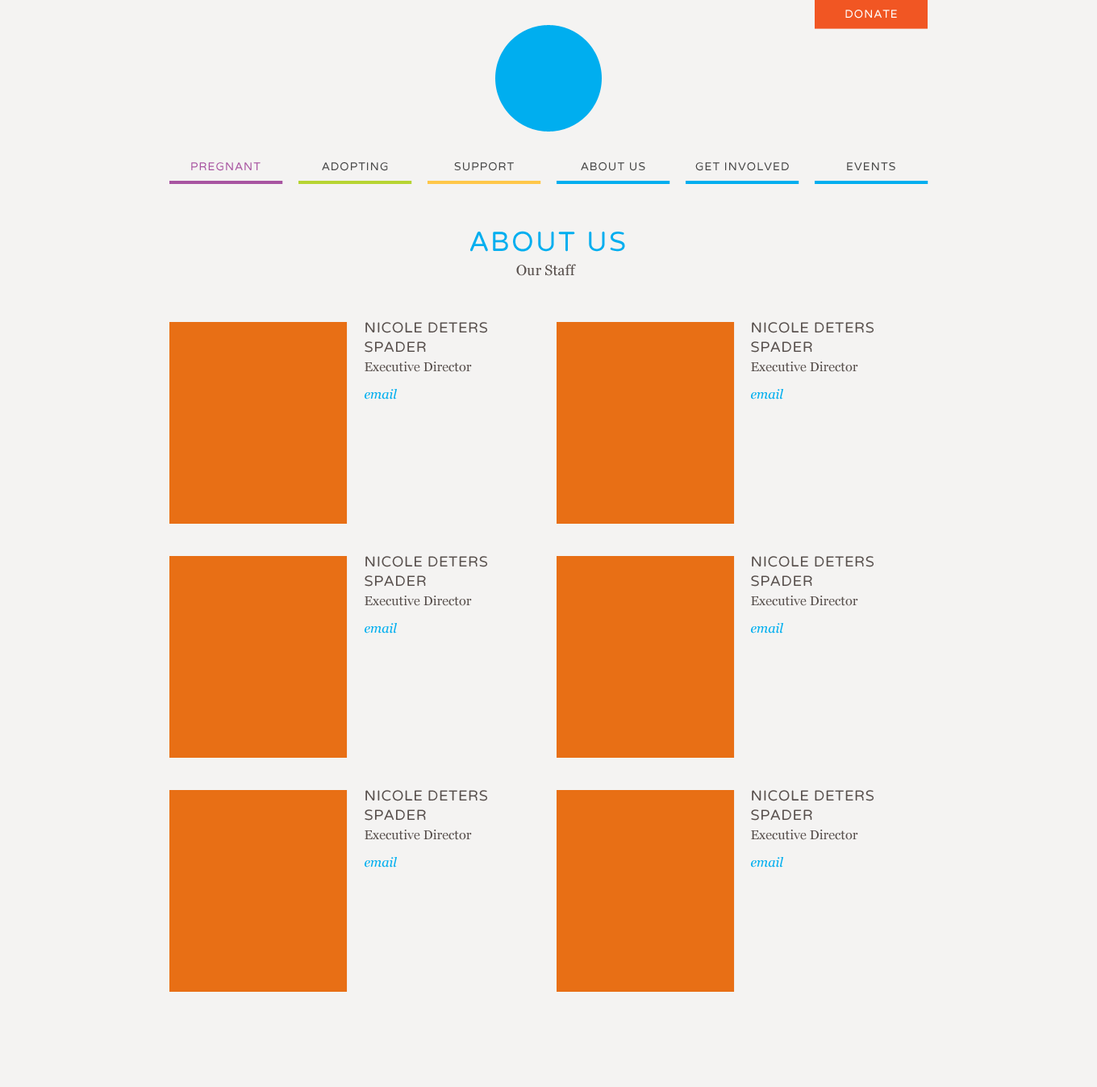
<style>
.page{position:relative;width:1097px;height:1087px;background:#f4f3f2}
.page>*{position:absolute;margin:0}
.t1{font:11.3px "VarelaRound";letter-spacing:0.075em;color:#ffffff;text-transform:uppercase}
.t2{font:11.3px "VarelaRound";letter-spacing:0.075em;color:#a854a1;text-transform:uppercase}
.t3{font:11.3px "VarelaRound";letter-spacing:0.075em;color:#464646;text-transform:uppercase}
.t4{font:27.4px "VarelaRound";letter-spacing:0.075em;color:#00aeef;text-transform:uppercase}
.t5{font:14.5px "Georgia";color:#58504d}
.t6{font:14.5px/19.4px "VarelaRound";letter-spacing:0.04em;color:#58504d;text-transform:uppercase}
.t7{font:12.9px/19.4px "Georgia";letter-spacing:0.005em;color:#58504d}
.t8{font:12.9px/19.4px "Georgia-Italic";letter-spacing:0.005em;color:#00aeef}
</style>
<div class="page">
<p class="t1" style="left:846px;top:10px;width:51px;height:9px">DONATE</p>
<p class="t2" style="left:191px;top:162px;width:70px;height:9px">pregnant</p>
<p class="t3" style="left:322px;top:162px;width:66px;height:9px">adopting</p>
<p class="t3" style="left:454px;top:162px;width:60px;height:9px">support</p>
<p class="t3" style="left:581px;top:162px;width:64px;height:9px">ABOUT us</p>
<p class="t3" style="left:695px;top:162px;width:94px;height:9px">get involved</p>
<p class="t3" style="left:847px;top:162px;width:49px;height:8px">events</p>
<p class="t4" style="left:470px;top:231px;width:155px;height:21px">about us</p>
<p class="t5" style="left:516px;top:264px;width:60px;height:12px">Our Staff</p>
<p class="t6" style="left:365px;top:322px;width:122px;height:77px">Nicole Deters Spader<br><span class="t7">Executive Director<br></span><span class="t8">email</span></p>
<p class="t6" style="left:751px;top:322px;width:123px;height:77px">Nicole Deters Spader<br><span class="t7">Executive Director<br></span><span class="t8">email</span></p>
<p class="t6" style="left:365px;top:556px;width:122px;height:77px">Nicole Deters Spader<br><span class="t7">Executive Director<br></span><span class="t8">email</span></p>
<p class="t6" style="left:751px;top:556px;width:123px;height:77px">Nicole Deters Spader<br><span class="t7">Executive Director<br></span><span class="t8">email</span></p>
<p class="t6" style="left:365px;top:790px;width:122px;height:77px">Nicole Deters Spader<br><span class="t7">Executive Director<br></span><span class="t8">email</span></p>
<p class="t6" style="left:751px;top:790px;width:123px;height:77px">Nicole Deters Spader<br><span class="t7">Executive Director<br></span><span class="t8">email</span></p>
</div>
